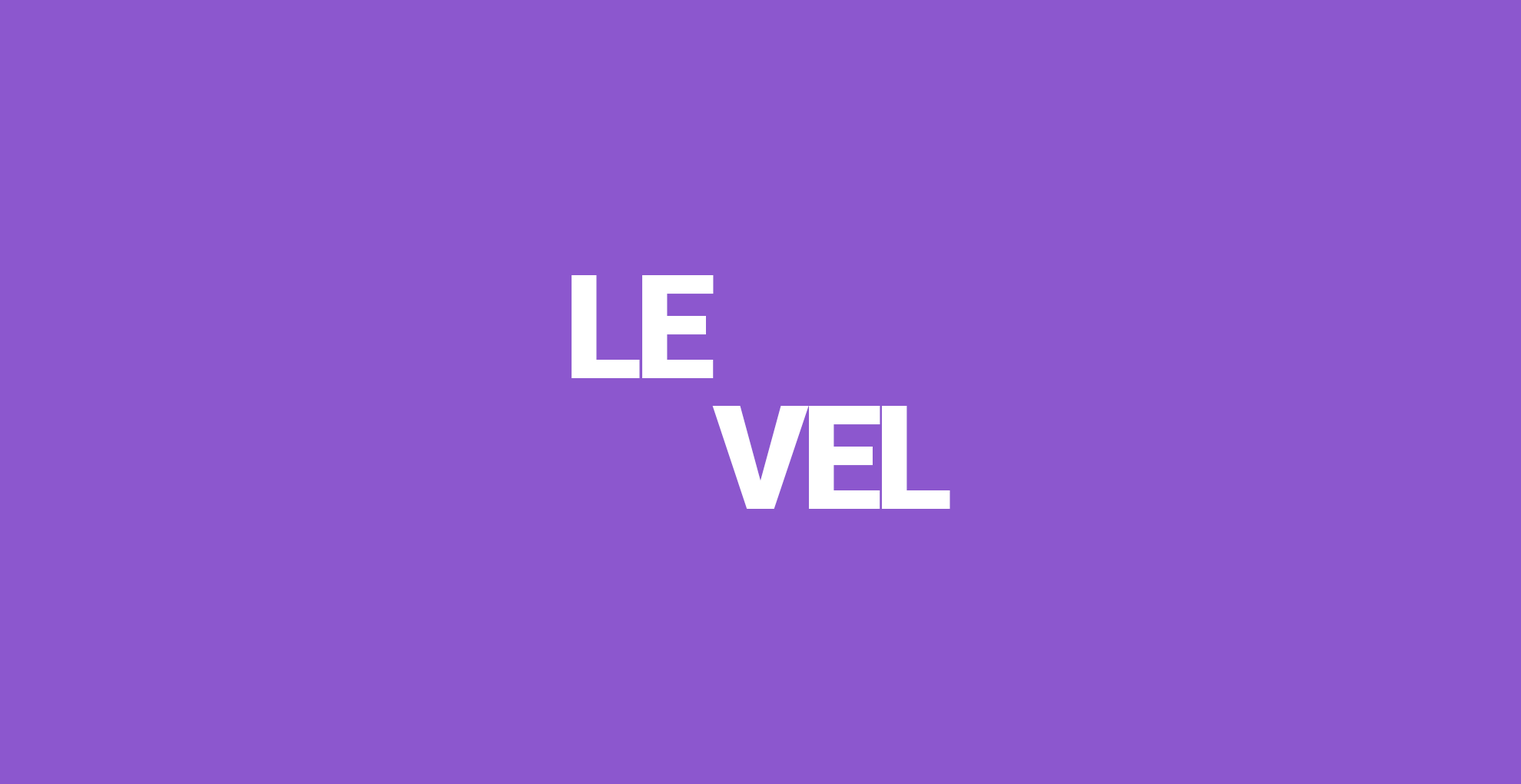
<style>
.page{position:relative;width:1521px;height:784px;background:#8c57ce}
.page>*{position:absolute;margin:0}
.t1{font:144.1px "Roboto-Black";letter-spacing:-0.05em;color:#ffffff}
</style>
<div class="page">
<p class="t1" style="left:572px;top:275px;width:142px;height:103px">LE</p>
<p class="t1" style="left:712px;top:406px;width:239px;height:103px">VEL</p>
</div>
